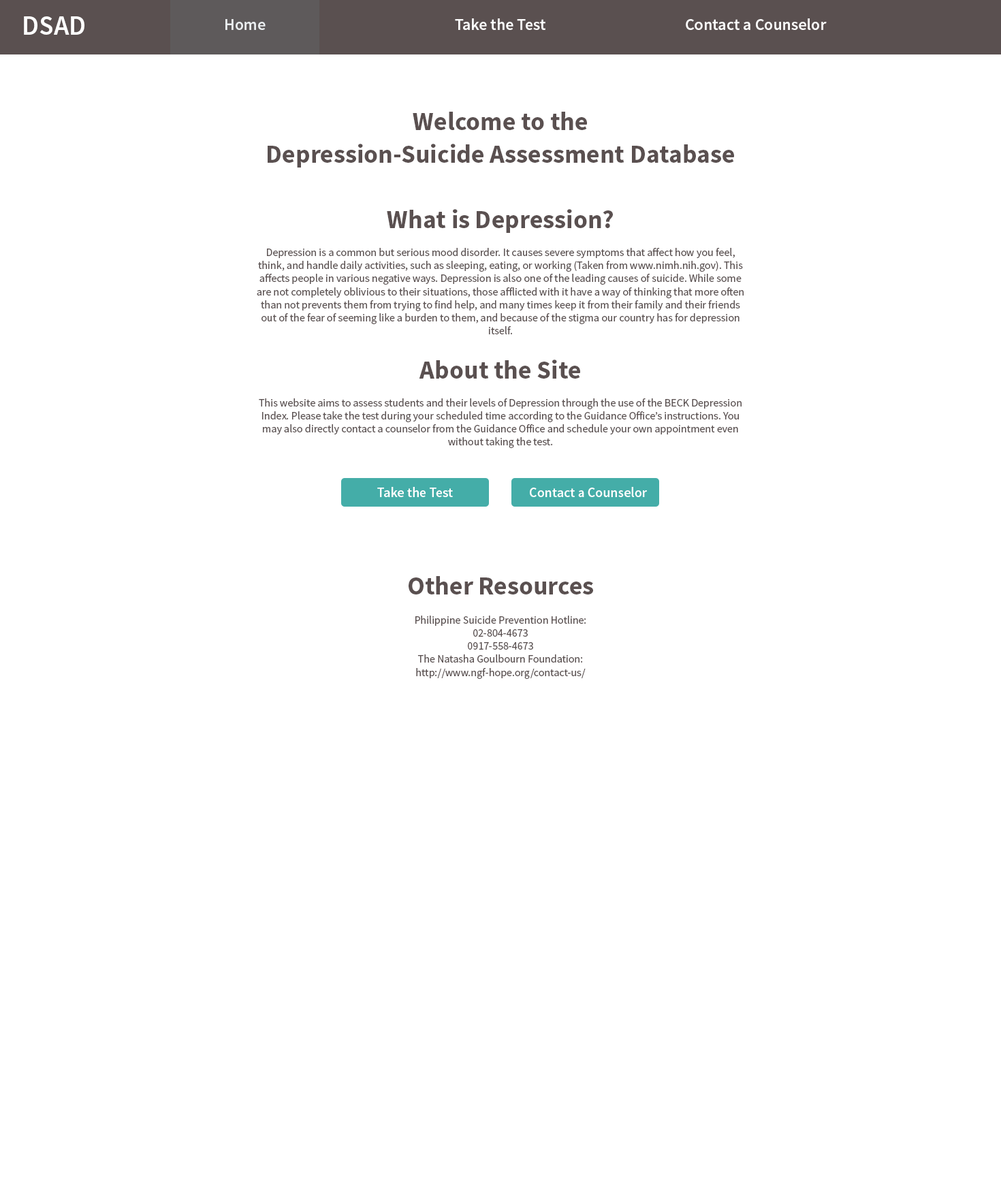
<style>
.page{position:relative;width:1001px;height:1191px;background:#ffffff}
.page>*{position:absolute;margin:0}
.t1{font:27.2px "SourceSansPro-Semibold";color:#ffffff}
.t2{font:16.3px "SourceSansPro-Semibold";color:#ffffff}
.t3{font:10.9px "SourceSansPro-Regular";color:#5a5050}
.t4{font:25.9px/32.7px "SourceSansPro-Bold";color:#5a5050}
.t5{font:25.9px "SourceSansPro-Bold";color:#5a5050}
.t6{font:13.6px "SourceSansPro-Semibold";color:#ffffff}
</style>
<div class="page">
<p class="t1" style="left:24px;top:16px;width:60px;height:19px">DSAD</p>
<p class="t2" style="left:225px;top:19px;width:41px;height:11px">Home</p>
<p class="t2" style="left:455px;top:18px;width:91px;height:12px">Take the Test</p>
<p class="t2" style="left:686px;top:18px;width:141px;height:12px">Contact a Counselor</p>
<p class="t3" style="left:257px;top:112px;width:487px;height:567px;text-align:center"><span class="t4">Welcome to the <br>Depression-Suicide Assessment Database<br><br>What is Depression?<br></span>Depression is a common but serious mood disorder. It causes severe symptoms that affect how you feel, think, and handle daily activities, such as sleeping, eating, or working (Taken from www.nimh.nih.gov). This affects people in various negative ways. Depression is also one of the leading causes of suicide. While some are not completely oblivious to their situations, those afflicted with it have a way of thinking that more often than not prevents them from trying to find help, and many times keep it from their family and their friends out of the fear of seeming like a burden to them, and because of the stigma our country has for depression itself.<br><br><br><span class="t4">About the Site<br></span>This website aims to assess students and their levels of Depression through the use of the BECK Depression Index. Please take the test during your scheduled time according to the Guidance Office’s instructions. You may also directly contact a counselor from the Guidance Office and schedule your own appointment even without taking the test.<br><br><br><br><br><br><br><br><br><br><span class="t5">Other Resources<br><br><br><br></span>Philippine Suicide Prevention Hotline:<br>02-804-4673<br>0917-558-4673<br>The Natasha Goulbourn Foundation:<br>http://www.ngf-hope.org/contact-us/</p>
<p class="t6" style="left:377px;top:487px;width:76px;height:10px">Take the Test</p>
<p class="t6" style="left:530px;top:487px;width:117px;height:10px">Contact a Counselor</p>
</div>
